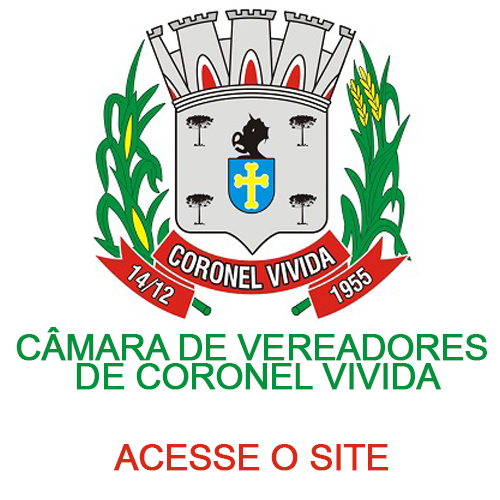
<style>
.page{position:relative;width:500px;height:500px;background:#ffffff}
.page>*{position:absolute;margin:0}
.t1{font:36px/29.3px "ArialMT";letter-spacing:-0.025em;color:#02923b;font-weight:bold}
.t2{font:36px "ArialMT";letter-spacing:-0.025em;color:#d92815;font-weight:bold}
</style>
<div class="page">
<p class="t1" style="left:16px;top:327px;width:471px;height:63px;text-align:center">CÂMARA DE VEREADORES <br>DE CORONEL VIVIDA</p>
<p class="t2" style="left:114px;top:444px;width:275px;height:27px">ACESSE O SITE</p>
</div>
